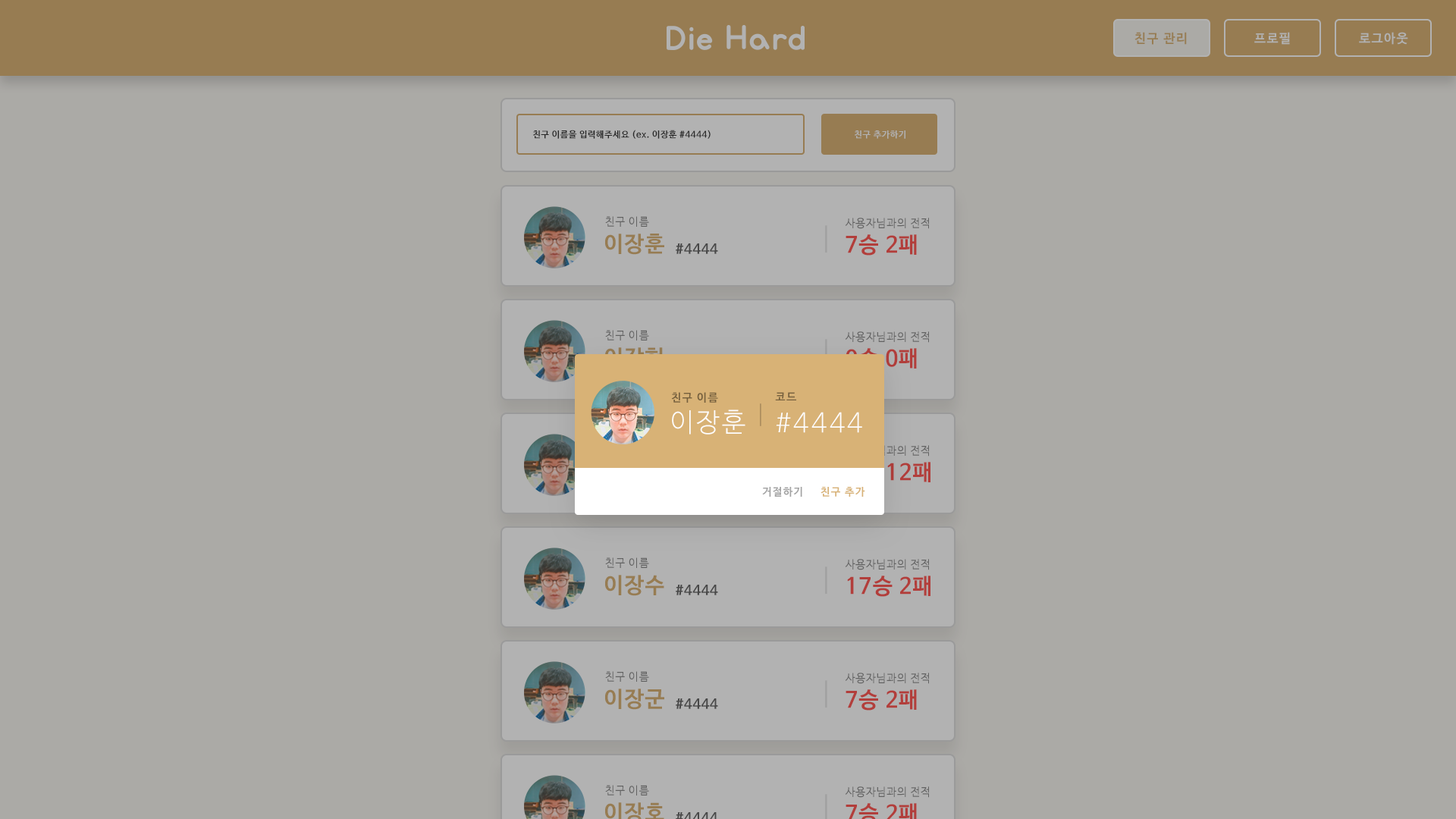
<style>
.page{position:relative;width:1456px;height:819px;background:#abaaa6}
.page>*{position:absolute;margin:0}
.t1{font:12.6px "NanumBarunGothicBold";letter-spacing:0.1em;color:#977c52}
.t2{font:12.6px "NanumBarunGothicBold";letter-spacing:0.1em;color:#b2b2b2}
.t3{font:12.6px "NanumBarunGothicBold";letter-spacing:0.1em;color:#b1b1b1}
.t4{font:8.8px "NanumBarunGothicBold";letter-spacing:0.05em;color:#383838}
.t5{font:8.8px "NanumBarunGothicBold";letter-spacing:0.05em;color:#b2b2b2}
.t6{font:11.1px "NanumBarunGothic";letter-spacing:0.05em;color:#626262}
.t7{font:22px "NanumBarunGothicBold";letter-spacing:0.05em;color:#977c52}
.t8{font:13.7px "NanumBarunGothicBold";letter-spacing:0.05em;color:#484848}
.t9{font:22px "NanumBarunGothicBold";letter-spacing:0.05em;color:#b23e3b}
.t10{font:22px "NanumBarunGothicBold";letter-spacing:0.05em;color:#d8b276}
.t11{font:22px "NanumBarunGothicBold";letter-spacing:0.05em}
.t12{font:11.1px "NanumBarunGothicBold";letter-spacing:0.1em;color:#76603e}
.t13{font:26.4px "NanumBarunGothicLight";letter-spacing:0.1em;color:#fefefe}
.t14{font:11.1px "NanumBarunGothic";letter-spacing:0.05em}
.t15{font:10.6px "NanumBarunGothicBold";letter-spacing:0.1em;color:#a3a3a3}
.t16{font:10.6px "NanumBarunGothicBold";letter-spacing:0.1em;color:#d8b276}
</style>
<div class="page">
<p class="t1" style="left:1134px;top:32px;width:53px;height:13px">친구 관리</p>
<p class="t2" style="left:1254px;top:32px;width:36px;height:13px">프로필</p>
<p class="t3" style="left:1359px;top:32px;width:49px;height:13px">로그아웃</p>
<p class="t4" style="left:533px;top:130px;width:178px;height:9px">친구 이름을 입력해주세요 (ex. 이장훈 #4444)</p>
<p class="t5" style="left:855px;top:130px;width:50px;height:9px">친구 추가하기</p>
<p class="t6" style="left:605px;top:216px;width:44px;height:11px">친구 이름</p>
<p class="t6" style="left:845px;top:218px;width:84px;height:11px">사용자님과의 전적</p>
<p class="t7" style="left:605px;top:234px;width:59px;height:21px">이장훈</p>
<p class="t8" style="left:676px;top:243px;width:42px;height:11px">#4444</p>
<p class="t9" style="left:846px;top:234px;width:71px;height:22px">7승 2패</p>
<p class="t6" style="left:605px;top:330px;width:44px;height:10px">친구 이름</p>
<p class="t6" style="left:845px;top:331px;width:84px;height:12px">사용자님과의 전적</p>
<p class="t10" style="left:605px;top:347px;width:58px;height:22px">이장현</p>
<p class="t11" style="left:846px;top:348px;width:71px;height:21px">0승 0패</p>
<p class="t12" style="left:671px;top:392px;width:47px;height:11px">친구 이름</p>
<p class="t12" style="left:775px;top:392px;width:21px;height:8px">코드</p>
<p class="t13" style="left:672px;top:409px;width:73px;height:26px">이장훈</p>
<p class="t13" style="left:776px;top:412px;width:86px;height:21px">#4444</p>
<p class="t14" style="left:845px;top:445px;width:84px;height:12px">사용자님과의 전적</p>
<p class="t11" style="left:846px;top:462px;width:84px;height:21px">7승 12패</p>
<p class="t15" style="left:762px;top:487px;width:40px;height:10px">거절하기</p>
<p class="t16" style="left:821px;top:487px;width:44px;height:10px">친구 추가</p>
<p class="t6" style="left:605px;top:557px;width:44px;height:11px">친구 이름</p>
<p class="t6" style="left:845px;top:559px;width:84px;height:11px">사용자님과의 전적</p>
<p class="t7" style="left:605px;top:575px;width:59px;height:21px">이장수</p>
<p class="t9" style="left:847px;top:576px;width:83px;height:21px">17승 2패</p>
<p class="t8" style="left:676px;top:585px;width:42px;height:10px">#4444</p>
<p class="t6" style="left:605px;top:671px;width:44px;height:11px">친구 이름</p>
<p class="t6" style="left:845px;top:673px;width:84px;height:11px">사용자님과의 전적</p>
<p class="t7" style="left:605px;top:689px;width:59px;height:21px">이장군</p>
<p class="t9" style="left:846px;top:689px;width:71px;height:22px">7승 2패</p>
<p class="t8" style="left:676px;top:698px;width:42px;height:11px">#4444</p>
<p class="t6" style="left:605px;top:785px;width:44px;height:10px">친구 이름</p>
<p class="t6" style="left:845px;top:786px;width:84px;height:12px">사용자님과의 전적</p>
</div>
